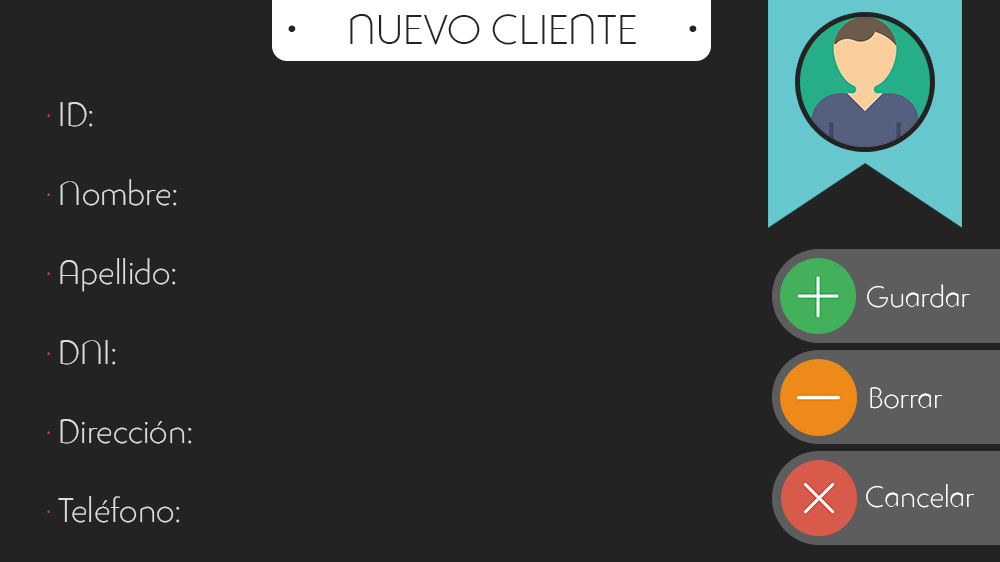
<style>
.page{position:relative;width:1000px;height:562px;background:#232323}
.page>*{position:absolute;margin:0}
.t1{font:41px "StudioGothicAlternateTrial-Extr";color:#232323}
.t2{font:97px "StudioGothicAlternateTrial-Extr";color:#232323}
.t3{font:33px "StudioGothicAlternateTrial-Extr";color:#dbdbdb}
.t4{font:33px "StudioGothicAlternateTrial-Extr";color:#d63f3f}
.t5{font:29px "StudioGothicAlternateTrial-Extr";color:#ffffff}
</style>
<div class="page">
<p class="t1" style="left:350px;top:14px;width:286px;height:31px">NUEVO CLIENTE</p>
<p class="t2" style="left:288px;top:25px;width:409px;height:7px">·                 ·</p>
<p class="t3" style="left:47px;top:102px;width:145px;height:421px"><span class="t4">· </span>ID:<br><span class="t4"><br>· </span>Nombre:<br><br><span class="t4">· </span>Apellido:<br><br><span class="t4">· </span>DNI:<br><span class="t4"><br>· </span>Dirección:<br><br><span class="t4">· </span>Teléfono:</p>
<p class="t5" style="left:867px;top:284px;width:103px;height:24px">Guardar</p>
<p class="t5" style="left:870px;top:387px;width:73px;height:22px">Borrar</p>
<p class="t5" style="left:866px;top:484px;width:109px;height:24px">Cancelar</p>
</div>
